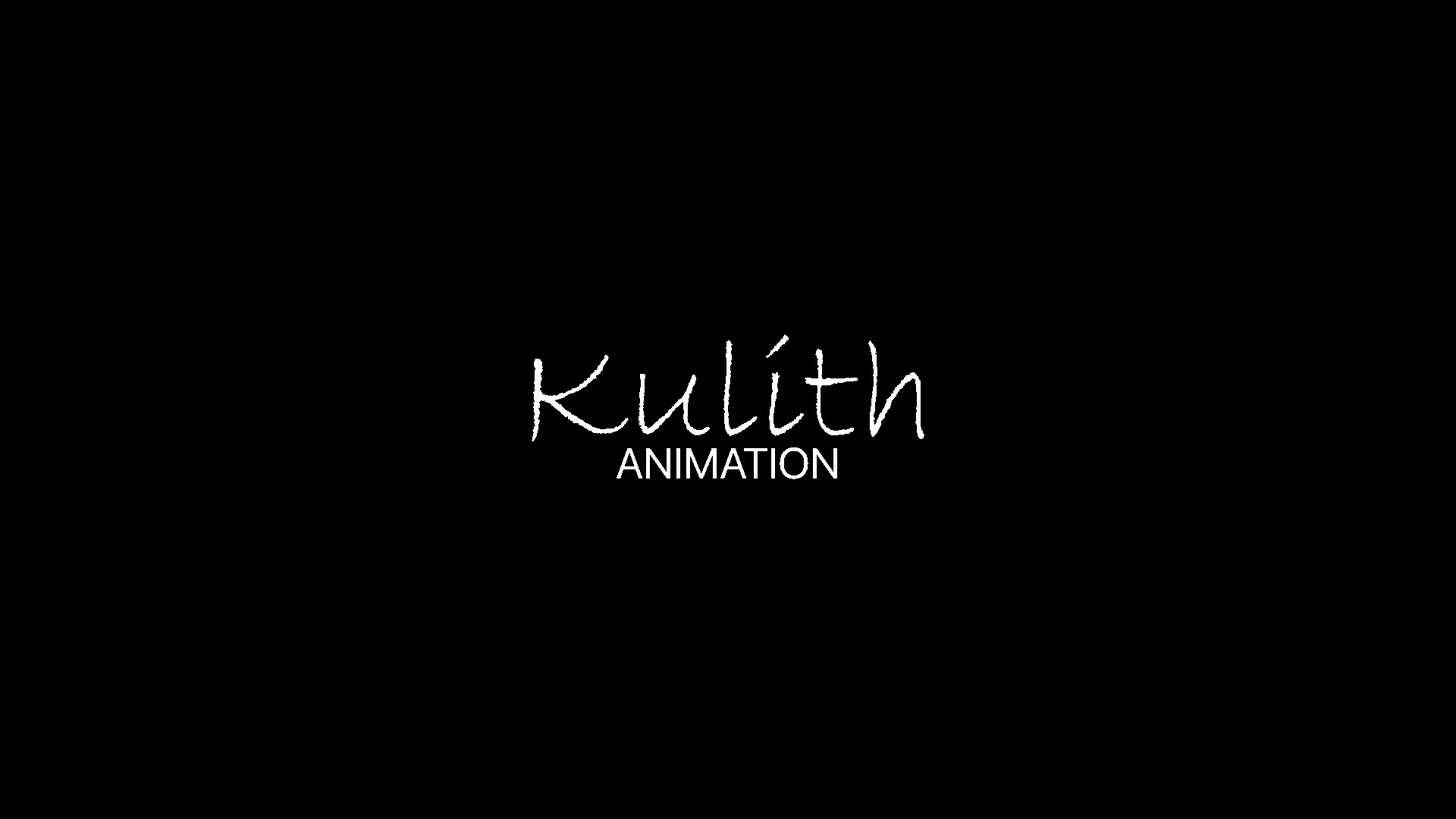
<style>
.page{position:relative;width:1456px;height:819px;background:#000000}
.page>*{position:absolute;margin:0}
.t1{font:150.8px "BradleyHandITC";color:#ffffff}
.t2{font:43.5px "SFProDisplay-Regular";color:#ffffff;text-transform:uppercase}
</style>
<div class="page">
<p class="t1" style="left:532px;top:334px;width:392px;height:107px">Kulith</p>
<p class="t2" style="left:617px;top:447px;width:220px;height:32px">Animation</p>
</div>
